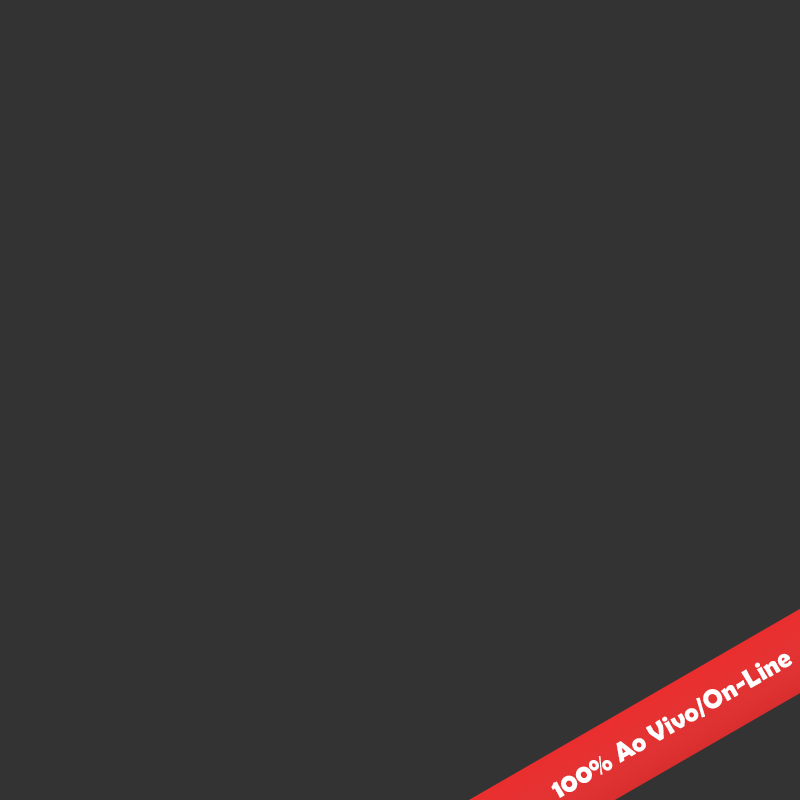
<style>
.page{position:relative;width:800px;height:800px;background:#333333}
.page>*{position:absolute;margin:0}
.t1{font:27px "BerlinSansFBDemi-Bold";color:#ffffff}
</style>
<div class="page">
<p class="t1" style="left:551px;top:653px;width:242px;height:145px;rotate:-30deg">100% Ao Vivo/On-Line</p>
</div>
